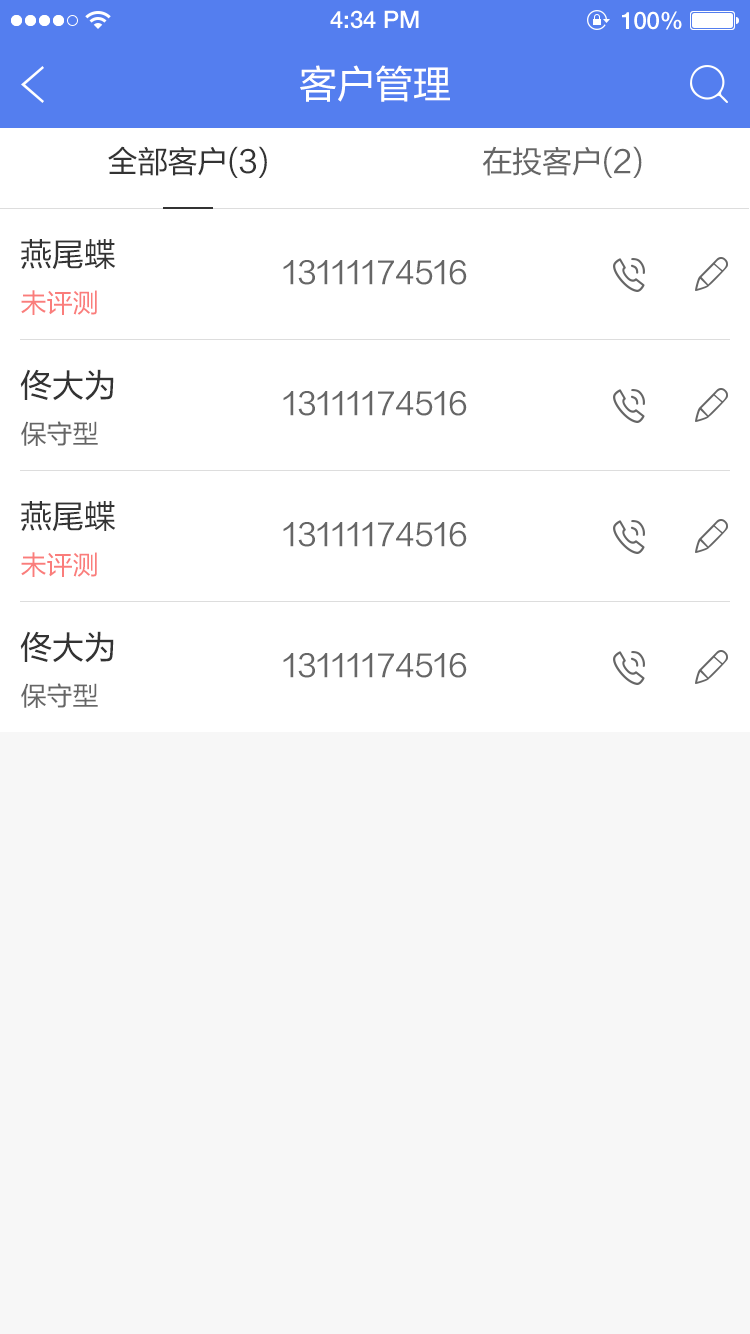
<style>
.page{position:relative;width:750px;height:1334px;background:#f7f7f7}
.page>*{position:absolute;margin:0}
.t1{font:24px "HelveticaNeueLTPro-Md";color:#ffffff}
.t2{font:38px "FZLTHJW-GB1-0";color:#ffffff}
.t3{font:30.2px "FZLTHJW-GB1-0";color:#333333}
.t4{font:30.2px "FZLTHJW-GB1-0";color:#666666}
.t5{font:32px "FZLTHJW-GB1-0";color:#333333}
.t6{font:30px "FZLTHJW-GB1-0";color:#666666}
.t7{font:26px "FZLTHJW-GB1-0";color:#fa7d7b}
.t8{font:26px "FZLTHJW-GB1-0";color:#666666}
</style>
<div class="page">
<p class="t1" style="left:330px;top:10px;width:89px;height:19px">4:34 PM</p>
<p class="t1" style="left:622px;top:11px;width:60px;height:19px">100%</p>
<p class="t2" style="left:300px;top:65px;width:150px;height:37px">客户管理</p>
<p class="t3" style="left:108px;top:146px;width:159px;height:32px">全部客户(3)</p>
<p class="t4" style="left:482px;top:146px;width:160px;height:32px">在投客户(2)</p>
<p class="t5" style="left:21px;top:239px;width:95px;height:31px">燕尾蝶</p>
<p class="t6" style="left:283px;top:260px;width:184px;height:25px">13111174516</p>
<p class="t7" style="left:21px;top:290px;width:76px;height:25px">未评测</p>
<p class="t5" style="left:20px;top:369px;width:94px;height:32px">佟大为</p>
<p class="t6" style="left:283px;top:391px;width:184px;height:25px">13111174516</p>
<p class="t8" style="left:21px;top:421px;width:77px;height:25px">保守型</p>
<p class="t5" style="left:21px;top:501px;width:95px;height:31px">燕尾蝶</p>
<p class="t6" style="left:283px;top:522px;width:184px;height:25px">13111174516</p>
<p class="t7" style="left:21px;top:552px;width:76px;height:25px">未评测</p>
<p class="t5" style="left:20px;top:631px;width:94px;height:32px">佟大为</p>
<p class="t6" style="left:283px;top:653px;width:184px;height:25px">13111174516</p>
<p class="t8" style="left:21px;top:683px;width:77px;height:25px">保守型</p>
</div>
